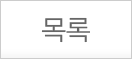
<style>
.page{position:relative;width:132px;height:59px;background:#ffffff}
.page>*{position:absolute;margin:0}
.t1{font:28px "YDVYGO32";color:#666666;scale:0.95 1}
</style>
<div class="page">
<p class="t1" style="left:41px;top:17px;width:49px;height:26px">목록</p>
</div>
